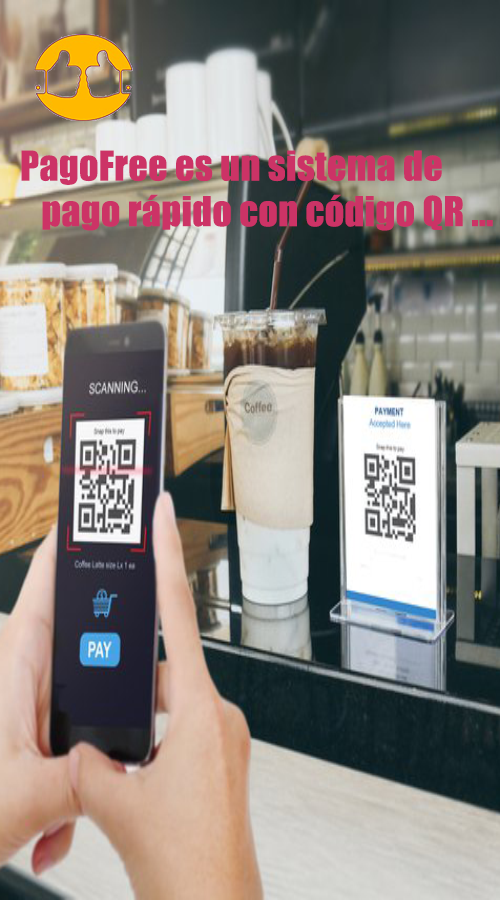
<style>
.page{position:relative;width:500px;height:900px}
.page>*{position:absolute;margin:0}
.t1{font:38px "Impact";letter-spacing:0.01em;color:#cc3366}
</style>
<div class="page">
<p class="t1" style="left:21px;top:150px;width:472px;height:81px">PagoFree es un sistema de    <br>   pago rápido con código QR ...</p>
</div>
